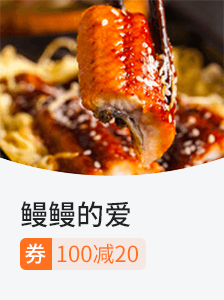
<style>
.page{position:relative;width:224px;height:300px;background:#f4f6f8}
.page>*{position:absolute;margin:0}
.t1{font:28px "SourceHanSansCN-Medium";color:#222222}
.t2{font:22px "SourceHanSansCN-Medium";color:#ffffff}
.t3{font:22px "SourceHanSansCN-Regular";color:#ff711f}
</style>
<div class="page">
<p class="t1" style="left:21px;top:201px;width:109px;height:27px">鳗鳗的爱</p>
<p class="t2" style="left:25px;top:243px;width:21px;height:21px">券</p>
<p class="t3" style="left:57px;top:243px;width:81px;height:21px">100减20</p>
</div>
